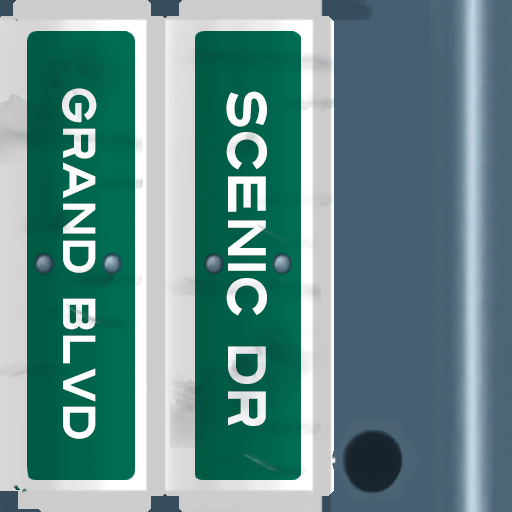
<style>
.page{position:relative;width:512px;height:512px}
.page>*{position:absolute;margin:0}
.t1{font:46px "Turnpike";color:#fefeff;scale:0.75 1}
.t2{font:54px "Turnpike";color:#fefeff;scale:0.75 1}
</style>
<div class="page">
<p class="t1" style="left:62px;top:88px;width:35px;height:351px;rotate:90deg">Grand BLVD</p>
<p class="t2" style="left:226px;top:91px;width:41px;height:335px;rotate:90deg">Scenic Dr</p>
</div>
